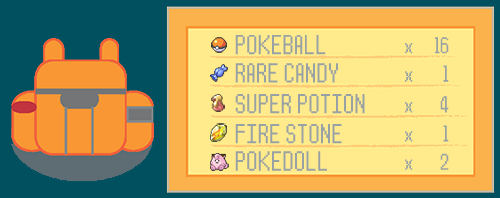
<style>
.page{position:relative;width:500px;height:198px;background:#ffeb8c}
.page>*{position:absolute;margin:0}
.t1{font:27.7px "Pokemon-Text";letter-spacing:0.04em;color:#98a1a3}
.t2{font:23.1px "Pokemon-Text";color:#98a1a3}
</style>
<div class="page">
<p class="t1" style="left:235px;top:35px;width:91px;height:20px">POKEBALL</p>
<p class="t2" style="left:405px;top:37px;width:44px;height:17px">x 16</p>
<p class="t1" style="left:235px;top:63px;width:103px;height:20px">RARE CANDY</p>
<p class="t2" style="left:405px;top:65px;width:44px;height:17px">x    1</p>
<p class="t1" style="left:235px;top:94px;width:130px;height:20px">SUPER POTION</p>
<p class="t2" style="left:405px;top:96px;width:44px;height:17px">x   4</p>
<p class="t1" style="left:235px;top:124px;width:107px;height:20px">FIRE STONE</p>
<p class="t2" style="left:405px;top:125px;width:44px;height:17px">x    1</p>
<p class="t1" style="left:235px;top:151px;width:92px;height:20px">POKEDOLL</p>
<p class="t2" style="left:405px;top:153px;width:44px;height:17px">x   2</p>
</div>
